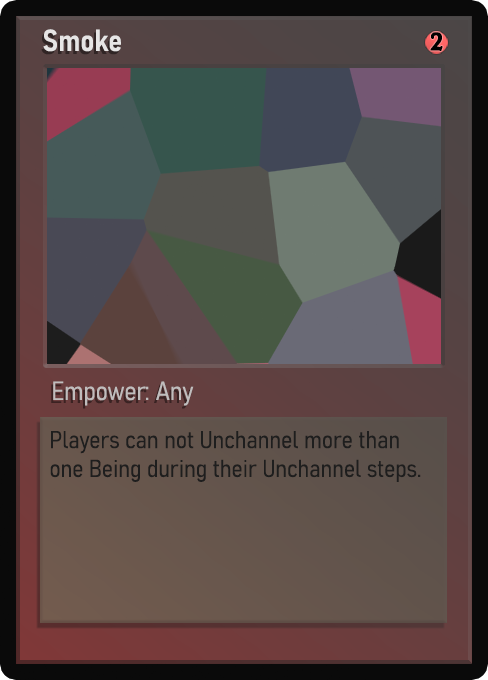
<style>
.page{position:relative;width:488px;height:680px}
.page>*{position:absolute;margin:0}
.t1{font:30px "Bahnschrift-SemiBoldSemiCondensed";color:#f2f2f2;font-weight:bold}
.t2{font:25px "WTRRoycroft";color:#000000;font-weight:bold;scale:1.09 1}
.t3{font:26px "Bahnschrift-LightSemiCondensed";color:#c8c8c8;font-weight:bold}
.t4{font:24px "Bahnschrift-LightSemiCondensed";color:#1e1e1e;font-weight:bold}
</style>
<div class="page">
<p class="t1" style="left:43px;top:29px;width:78px;height:23px;opacity:0.9">Smoke</p>
<p class="t2" style="left:430px;top:32px;width:13px;height:19px">2</p>
<p class="t3" style="left:53px;top:381px;width:141px;height:25px;opacity:0.9">Empower: Any</p>
<p class="t4" style="left:50px;top:431px;width:371px;height:51px">Players can not Unchannel more than one Being during their Unchannel steps.</p>
</div>
